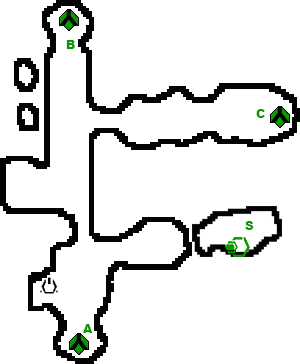
<style>
.page{position:relative;width:300px;height:364px;background:#ffffff}
.page>*{position:absolute;margin:0}
.t1{font:12px "Arial-Black";color:#0c9801}
</style>
<div class="page">
<p class="t1" style="left:66px;top:40px;width:9px;height:9px">B</p>
<p class="t1" style="left:256px;top:109px;width:9px;height:9px">C</p>
<p class="t1" style="left:245px;top:221px;width:9px;height:9px">S</p>
<p class="t1" style="left:83px;top:324px;width:10px;height:9px">A</p>
</div>
